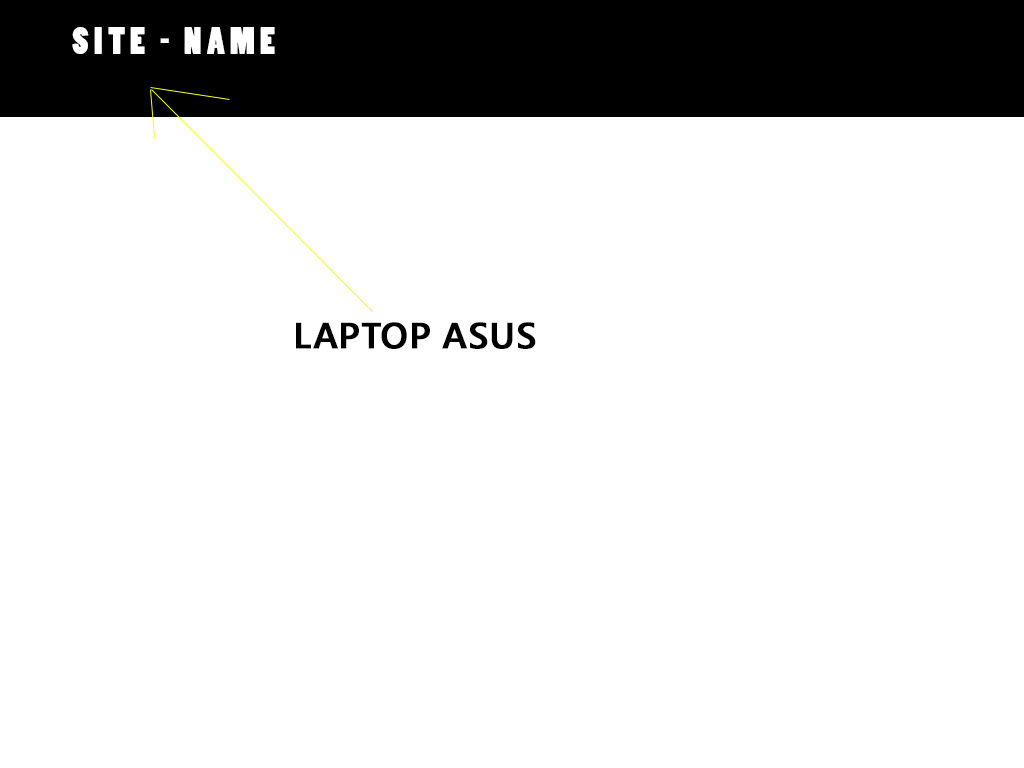
<style>
.page{position:relative;width:1024px;height:768px;background:#ffffff}
.page>*{position:absolute;margin:0}
.t1{font:36px "PoplarStd";letter-spacing:0.15em;color:#ffffff;text-transform:uppercase}
.t2{font:36px "SegoeUI-Semibold";letter-spacing:0.01em;color:#000000;text-transform:uppercase;font-weight:bold}
</style>
<div class="page">
<p class="t1" style="left:72px;top:27px;width:203px;height:27px">Site - Name</p>
<p class="t2" style="left:296px;top:322px;width:240px;height:27px">LAPTOP ASUS</p>
</div>
